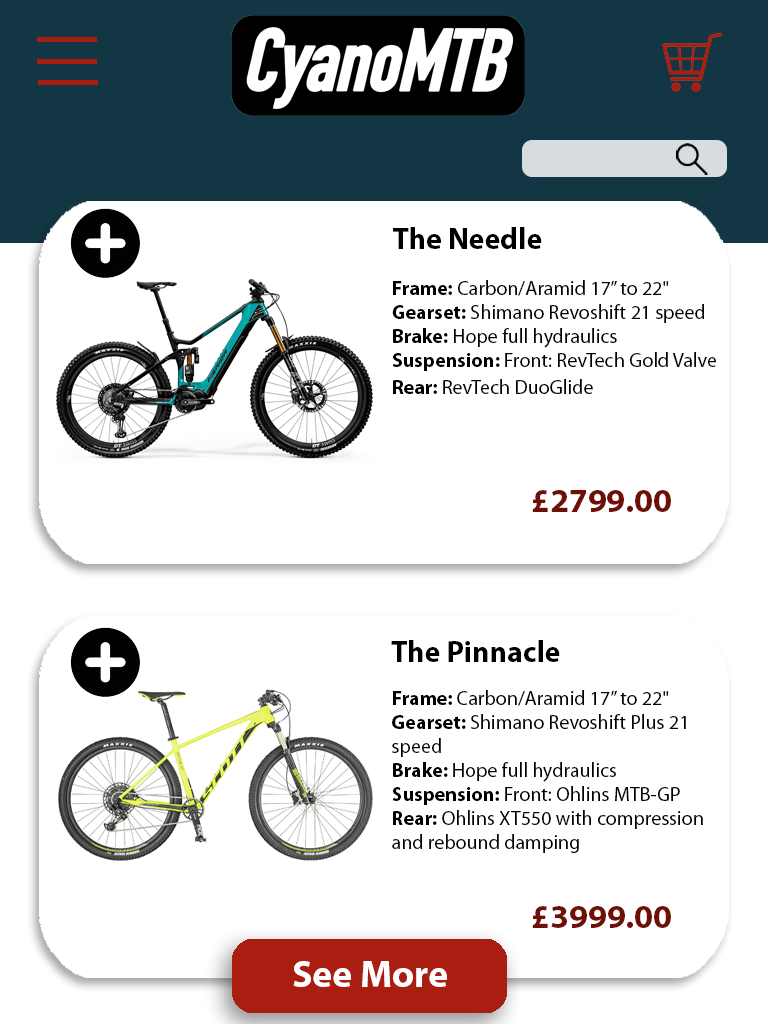
<style>
.page{position:relative;width:768px;height:1024px;background:#ffffff}
.page>*{position:absolute;margin:0}
.t1{font:30px "MyriadPro-Bold";color:#000000}
.t2{font:20px "MyriadPro-Regular";color:#000000}
.t3{font:20px "MyriadPro-Bold";color:#000000}
.t4{font:34px "MyriadPro-Bold";color:#700f06}
.t5{font:38px "MyriadPro-Bold";color:#ffffff}
</style>
<div class="page">
<p class="t1" style="left:393px;top:227px;width:149px;height:22px">The Needle</p>
<p class="t2" style="left:392px;top:280px;width:324px;height:114px"><span class="t3">Frame:</span> Carbon/Aramid 17” to 22"<br><span class="t3">Gearset:</span> Shimano Revoshift 21 speed<br><span class="t3">Brake:</span> Hope full hydraulics<br><span class="t3">Suspension: </span>Front: RevTech Gold Valve <br><span class="t3">Rear:</span> RevTech DuoGlide</p>
<p class="t4" style="left:532px;top:490px;width:139px;height:22px">£2799.00</p>
<p class="t1" style="left:391px;top:640px;width:169px;height:22px">The Pinnacle</p>
<p class="t2" style="left:392px;top:690px;width:311px;height:163px"><span class="t3">Frame: </span>Carbon/Aramid 17” to 22"<br><span class="t3">Gearset:</span> Shimano Revoshift Plus 21 <br>speed<br><span class="t3">Brake: </span>Hope full hydraulics<br><span class="t3">Suspension: </span>Front: Ohlins MTB-GP <br><span class="t3">Rear:</span> Ohlins XT550 with compression <br>and rebound damping</p>
<p class="t4" style="left:532px;top:906px;width:139px;height:22px">£3999.00</p>
<p class="t5" style="left:293px;top:961px;width:154px;height:26px">See More</p>
</div>
